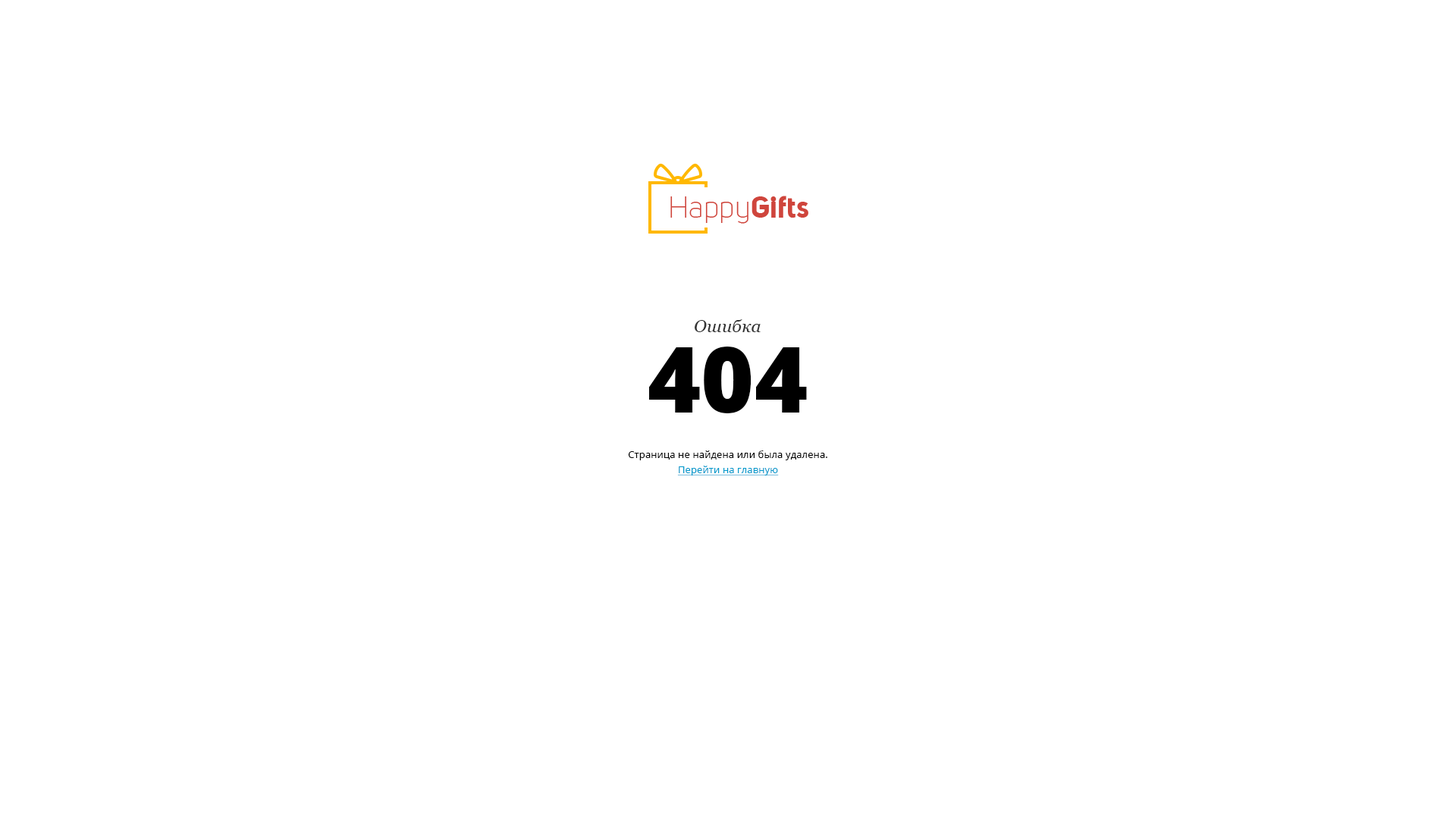
<style>
.page{position:relative;width:1456px;height:819px;background:#ffffff}
.page>*{position:absolute;margin:0}
.t1{font:17.7px "Georgia-Italic";color:#333333}
.t2{font:91px "OpenSans-Extrabold";color:#000000}
.t3{font:9.9px/15.2px "OpenSans";letter-spacing:0.01em;color:#000000}
.t4{font:9.9px/15.2px "OpenSans";letter-spacing:0.01em;color:#0099cc;text-decoration:underline}
</style>
<div class="page">
<p class="t1" style="left:695px;top:319px;width:66px;height:13px">Ошибка</p>
<p class="t2" style="left:649px;top:347px;width:158px;height:66px">404</p>
<p class="t3" style="left:628px;top:450px;width:199px;height:25px;text-align:center">Страница не найдена или была удалена.<br><span class="t4">Перейти на главную</span></p>
</div>
